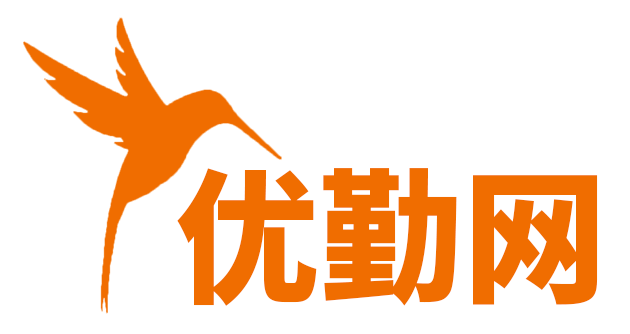
<style>
.page{position:relative;width:630px;height:334px;background:#ffffff}
.page>*{position:absolute;margin:0}
.t1{font:144px "SourceHanSansCN-Heavy";color:#f06d00}
</style>
<div class="page">
<p class="t1" style="left:177px;top:168px;width:421px;height:138px">优勤网</p>
</div>
